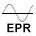
<style>
.page{position:relative;width:36px;height:36px;background:#ffffff}
.page>*{position:absolute;margin:0}
.t1{font:12px "Arial-BoldMT";color:#000000}
</style>
<div class="page">
<p class="t1" style="left:7px;top:23px;width:24px;height:10px">EPR</p>
</div>
